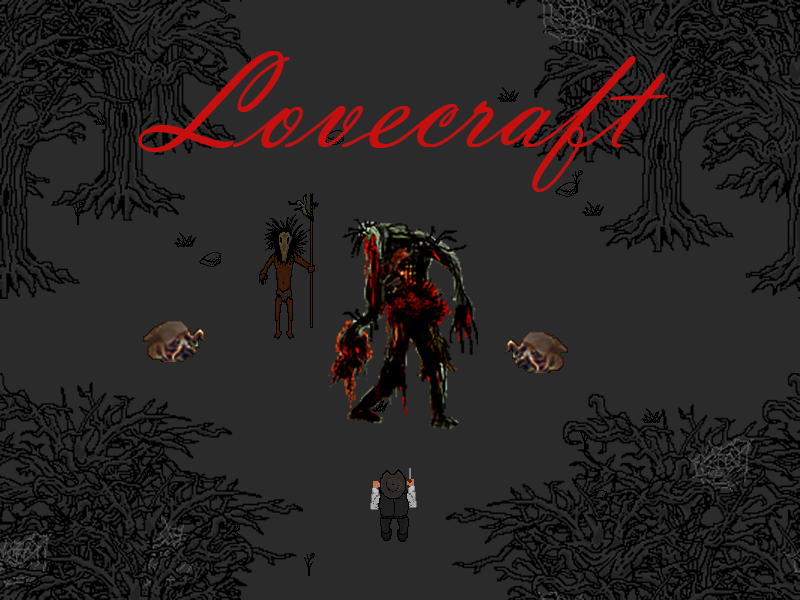
<style>
.page{position:relative;width:800px;height:600px;background:#2b2b2b}
.page>*{position:absolute;margin:0}
.t1{font:150px "VladimirScript";color:#c90e0e}
</style>
<div class="page">
<p class="t1" style="left:138px;top:51px;width:530px;height:141px">Lovecraft</p>
</div>
